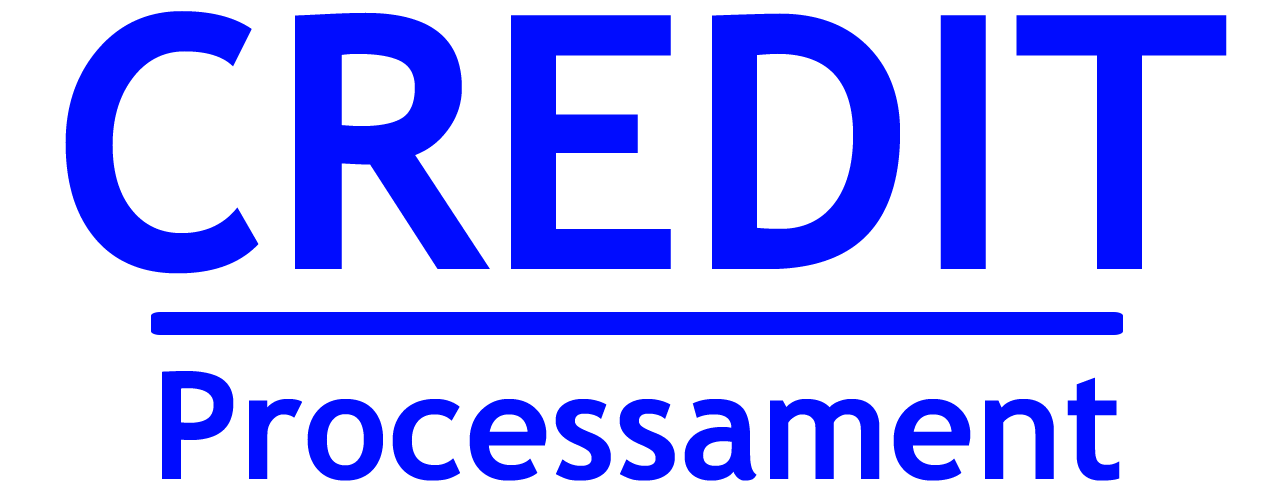
<style>
.page{position:relative;width:1264px;height:501px;background:#ffffff}
.page>*{position:absolute;margin:0}
.t1{font:354.2px "TrebuchetMS-Bold";color:#000cff}
.t2{font:150px "TrebuchetMS-Bold";color:#000cff}
</style>
<div class="page">
<p class="t1" style="left:65px;top:11px;width:1162px;height:263px">CREDIT</p>
<p class="t2" style="left:162px;top:371px;width:958px;height:110px">Processament</p>
</div>
